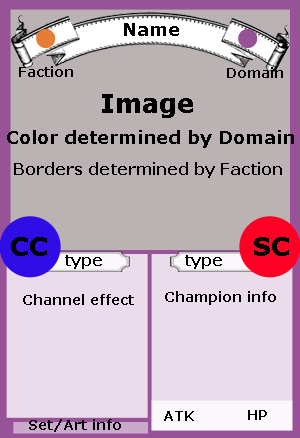
<style>
.page{position:relative;width:300px;height:438px;background:#bbb3b3}
.page>*{position:absolute;margin:0}
.t1{font:18px "Verdana-Bold";color:#000000}
.t2{font:14px "Verdana-Bold";color:#000000}
.t3{font:26px "Verdana-Bold";color:#000000}
.t4{font:16px "Verdana-Bold";color:#000000}
</style>
<div class="page">
<p class="t1" style="left:124px;top:23px;width:55px;height:13px">Name</p>
<p class="t2" style="left:19px;top:66px;width:54px;height:11px">Faction</p>
<p class="t2" style="left:227px;top:67px;width:56px;height:11px">Domain</p>
<p class="t3" style="left:102px;top:94px;width:91px;height:24px">Image</p>
<p class="t1" style="left:7px;top:130px;width:287px;height:18px">Color determined by Domain</p>
<p class="t4" style="left:14px;top:162px;width:268px;height:16px">Borders determined by Faction</p>
<p class="t3" style="left:11px;top:237px;width:36px;height:19px">CC</p>
<p class="t3" style="left:254px;top:237px;width:35px;height:19px">SC</p>
<p class="t4" style="left:65px;top:255px;width:37px;height:14px">type</p>
<p class="t4" style="left:185px;top:255px;width:37px;height:14px">type</p>
<p class="t2" style="left:23px;top:294px;width:111px;height:11px">Channel effect</p>
<p class="t2" style="left:165px;top:291px;width:111px;height:14px">Champion info</p>
<p class="t2" style="left:164px;top:411px;width:30px;height:10px">ATK</p>
<p class="t2" style="left:248px;top:410px;width:19px;height:10px">HP</p>
<p class="t2" style="left:29px;top:419px;width:92px;height:13px">Set/Art info</p>
</div>
